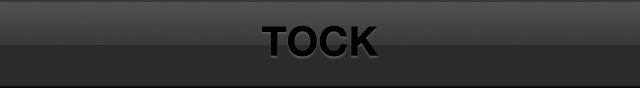
<style>
.page{position:relative;width:640px;height:88px;background:#2b2b2b}
.page>*{position:absolute;margin:0}
.t1{font:40.8px "HelveticaNeue-Bold";color:#000000}
</style>
<div class="page">
<p class="t1" style="left:262px;top:25px;width:117px;height:32px">TOCK</p>
</div>
